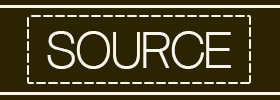
<style>
.page{position:relative;width:280px;height:100px;background:#2b2301}
.page>*{position:absolute;margin:0}
.t1{font:50px "Aliquam";color:#f9f7ea}
</style>
<div class="page">
<p class="t1" style="left:47px;top:31px;width:184px;height:38px">SOURCE</p>
</div>
